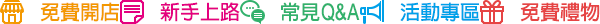
<style>
.page{position:relative;width:600px;height:24px;background:#ffffff}
.page>*{position:absolute;margin:0}
.t1{font:20px "LinGothic-bold";color:#f39800}
.t2{font:20px "LinGothic-bold";color:#e4007f}
.t3{font:20px "LinGothic-bold";color:#32b16c}
.t4{font:23px "ArialNarrow";letter-spacing:-0.01em;color:#32b16c;scale:0.95 1}
.t5{font:23px "ArialNarrow";letter-spacing:0.025em;color:#32b16c;scale:0.95 1}
.t6{font:20px "LinGothic-bold";color:#00a1e9}
.t7{font:20px "LinGothic-bold";color:#e64444}
</style>
<div class="page">
<p class="t1" style="left:40px;top:2px;width:79px;height:20px">免費開店</p>
<p class="t2" style="left:160px;top:2px;width:80px;height:20px">新手上路</p>
<p class="t3" style="left:281px;top:2px;width:39px;height:20px">常見</p>
<p class="t4" style="left:321px;top:3px;width:39px;height:19px">Q<span class="t5">&amp;</span>A</p>
<p class="t6" style="left:400px;top:2px;width:79px;height:20px">活動專區</p>
<p class="t7" style="left:520px;top:2px;width:80px;height:20px">免費禮物</p>
</div>
